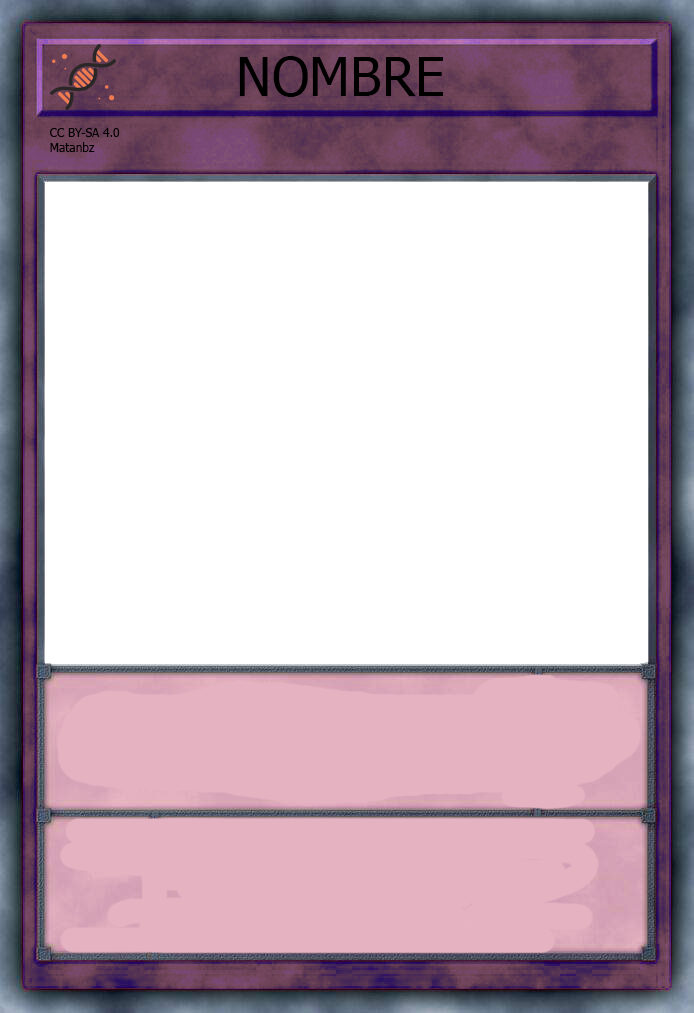
<style>
.page{position:relative;width:694px;height:1013px;background:#ffffff}
.page>*{position:absolute;margin:0}
.t1{font:53.8px "Tahoma";color:#000000}
.t2{font:12px "Tahoma";color:#000000}
</style>
<div class="page">
<p class="t1" style="left:239px;top:56px;width:204px;height:41px">NOMBRE</p>
<p class="t2" style="left:50px;top:128px;width:70px;height:24px">CC BY-SA 4.0<br>Matanbz</p>
</div>
